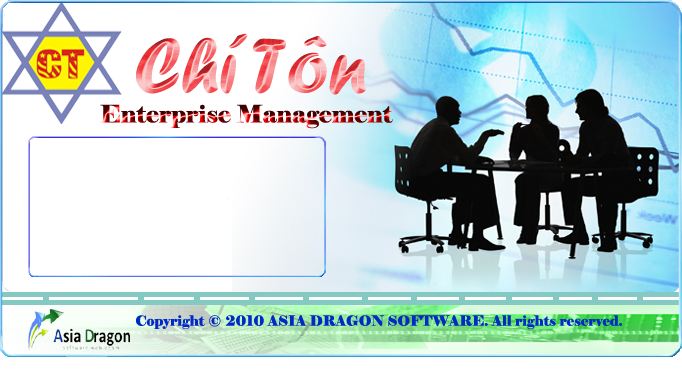
<style>
.page{position:relative;width:682px;height:385px;background:#ffffff}
.page>*{position:absolute;margin:0}
.t1{font:81.5px "ForteMT";scale:0.93 1}
.t2{font:24px "Elephant-Regular"}
.t3{font:14px "Elephant-Regular";color:#002ac4}
</style>
<div class="page">
<p class="t1" style="left:136px;top:33px;width:230px;height:62px">Chí Tôn</p>
<p class="t2" style="left:100px;top:104px;width:293px;height:25px">Enterprise Management</p>
<p class="t3" style="left:136px;top:315px;width:486px;height:14px">Copyright © 2010 ASIA DRAGON SOFTWARE. All rights reserved.</p>
</div>
